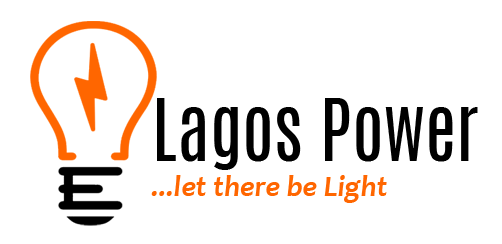
<style>
.page{position:relative;width:502px;height:244px;background:#ffffff}
.page>*{position:absolute;margin:0}
.t1{font:72px "Antonio-Regular";color:#000000}
.t2{font:30px "Candara-BoldItalic";color:#ff6600}
</style>
<div class="page">
<p class="t1" style="left:157px;top:98px;width:321px;height:72px">Lagos Power</p>
<p class="t2" style="left:151px;top:175px;width:236px;height:28px">...let there be Light</p>
</div>
